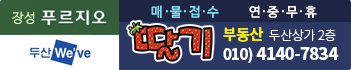
<style>
.page{position:relative;width:351px;height:70px;background:#2c3864}
.page>*{position:absolute;margin:0}
.t1{font:13px "NanumBarunGothicOTF";letter-spacing:0.05em;color:#87ddf2}
.t2{font:13px "NanumBarunGothicOTF";letter-spacing:0.05em;color:#ffffff}
.t3{font:13px "NanumBarunGothicOTFLight";color:#e3ffb8}
.t4{font:13px "NotoSansCJKkr-Light";letter-spacing:-0.025em;color:#ffffff}
.t5{font:15px "NotoSansCJKkr-Bold";letter-spacing:-0.025em;color:#fff600}
.t6{font:17px "NotoSansCJKkr-Black";letter-spacing:-0.05em;color:#ffffff}
.t7{font:15px "NotoSansCJKkr-Black";letter-spacing:-0.05em;color:#ffffff}
</style>
<div class="page">
<p class="t1" style="left:151px;top:5px;width:166px;height:13px">매・물・접・수          <span class="t2">연・중・무・휴</span></p>
<p class="t3" style="left:12px;top:11px;width:23px;height:13px">장성</p>
<p class="t4" style="left:223px;top:27px;width:113px;height:15px"><span class="t5">부동산  </span>두산상가 2층</p>
<p class="t6" style="left:223px;top:47px;width:116px;height:16px"><span class="t7">010) </span>4140-7834</p>
</div>
